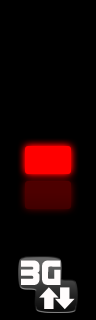
<style>
.page{position:relative;width:96px;height:320px;background:#000000}
.page>*{position:absolute;margin:0}
.t1{font:36.1px "DendriticVoltage";color:#fffcfc}
</style>
<div class="page">
<p class="t1" style="left:21px;top:260px;width:40px;height:25px">3G</p>
</div>
